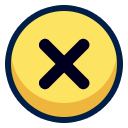
<style>
.page{position:relative;width:128px;height:128px;background:#fde362}
.page>*{position:absolute;margin:0}
.t1{font:100px "rounded-mplus-1p-bold";letter-spacing:0.08em;color:#00001e}
</style>
<div class="page">
<p class="t1" style="left:39px;top:38px;width:51px;height:52px">×</p>
</div>
